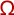
<style>
.page{position:relative;width:14px;height:15px;background:#ffffff}
.page>*{position:absolute;margin:0}
.t1{font:20px "Helvetica";letter-spacing:0.04em;color:#b60000}
</style>
<div class="page">
<p class="t1" style="left:0px;top:0px;width:14px;height:15px">Ω</p>
</div>
